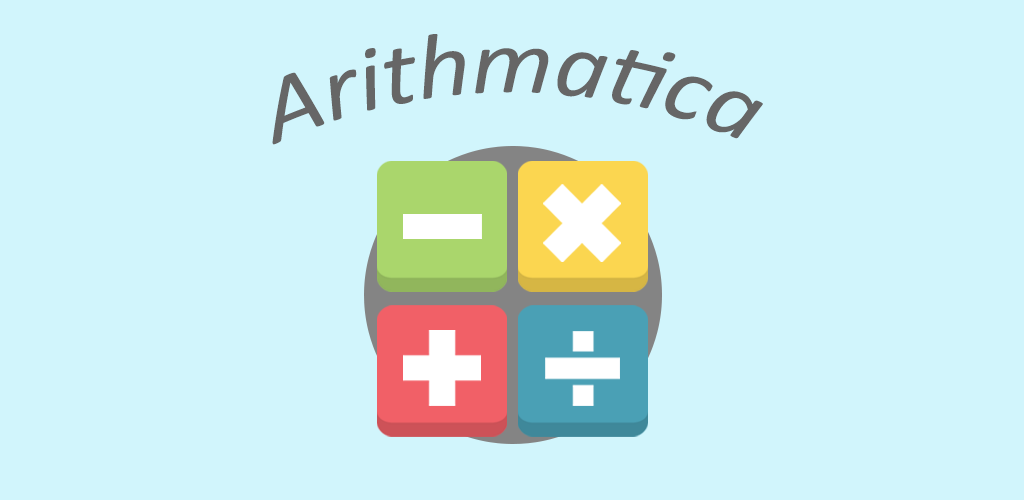
<style>
.page{position:relative;width:1024px;height:500px;background:#d1f5fc}
.page>*{position:absolute;margin:0}
.t1{font:93.3px "Calibri-Italic";color:#666666}
</style>
<div class="page">
<p class="t1" style="left:272px;top:34px;width:491px;height:111px">Arithmatica</p>
</div>
